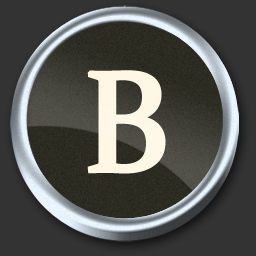
<style>
.page{position:relative;width:256px;height:256px;background:#333333}
.page>*{position:absolute;margin:0}
.t1{font:144px "Constantia";color:#fff6e3;font-weight:bold}
</style>
<div class="page">
<p class="t1" style="left:87px;top:70px;width:79px;height:104px">B</p>
</div>
